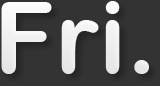
<style>
.page{position:relative;width:160px;height:86px;background:#333333}
.page>*{position:absolute;margin:0}
.t1{font:100px "ArialRoundedMTBold";color:#ffffff}
</style>
<div class="page">
<p class="t1" style="left:1px;top:1px;width:148px;height:73px">Fri.</p>
</div>
